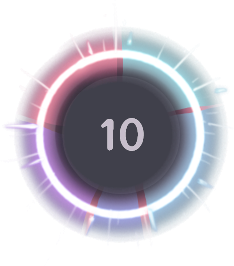
<style>
.page{position:relative;width:234px;height:266px;background:#ffffff}
.page>*{position:absolute;margin:0}
.t1{font:39.8px "MaokenZhuyuanTi-Regular";color:#c7becc}
</style>
<div class="page">
<p class="t1" style="left:101px;top:118px;width:43px;height:33px">10</p>
<p class="t1" style="left:101px;top:118px;width:43px;height:33px">10</p>
</div>
